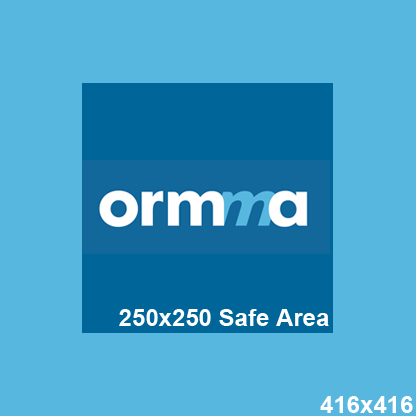
<style>
.page{position:relative;width:416px;height:416px;background:#57b7df}
.page>*{position:absolute;margin:0}
.t1{font:24px "Arial-BoldMT";color:#ffffff}
</style>
<div class="page">
<p class="t1" style="left:119px;top:309px;width:210px;height:17px">250x250 Safe Area</p>
<p class="t1" style="left:320px;top:396px;width:93px;height:17px">416x416</p>
</div>
